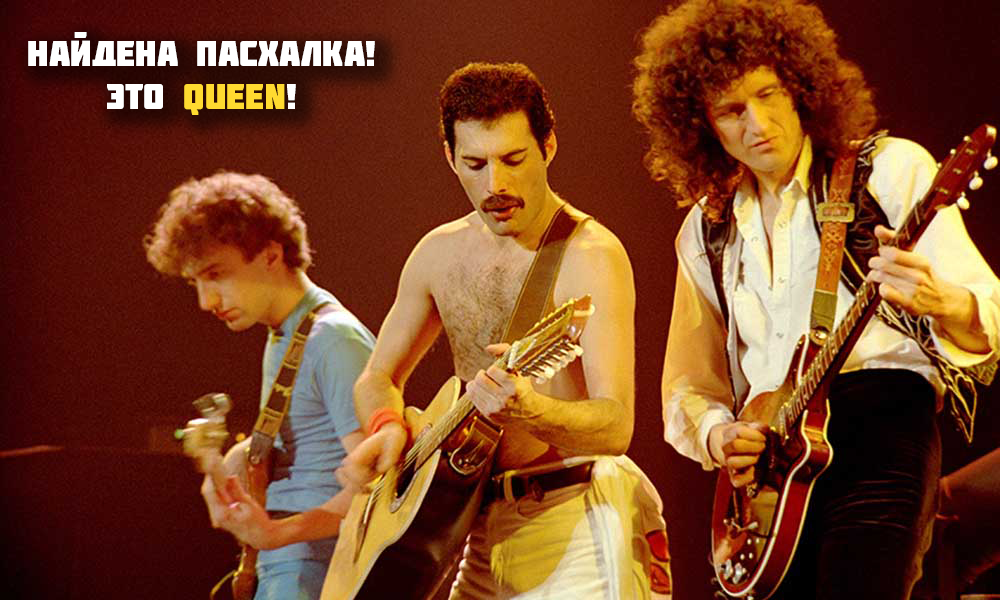
<style>
.page{position:relative;width:1000px;height:600px}
.page>*{position:absolute;margin:0}
.t1{font:35.8px "Molot";color:#ffffff}
.t2{font:35.8px "Molot";color:#ffda30}
</style>
<div class="page">
<p class="t1" style="left:28px;top:32px;width:347px;height:83px;text-align:center">Найдена пасхалка!<br>это <span class="t2">queen</span>!</p>
</div>
